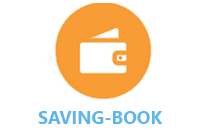
<style>
.page{position:relative;width:205px;height:138px;background:#ffffff}
.page>*{position:absolute;margin:0}
.t1{font:18px "NirmalaUI-Bold";color:#5eb5ea}
</style>
<div class="page">
<p class="t1" style="left:38px;top:111px;width:125px;height:13px">SAVING-BOOK</p>
</div>
